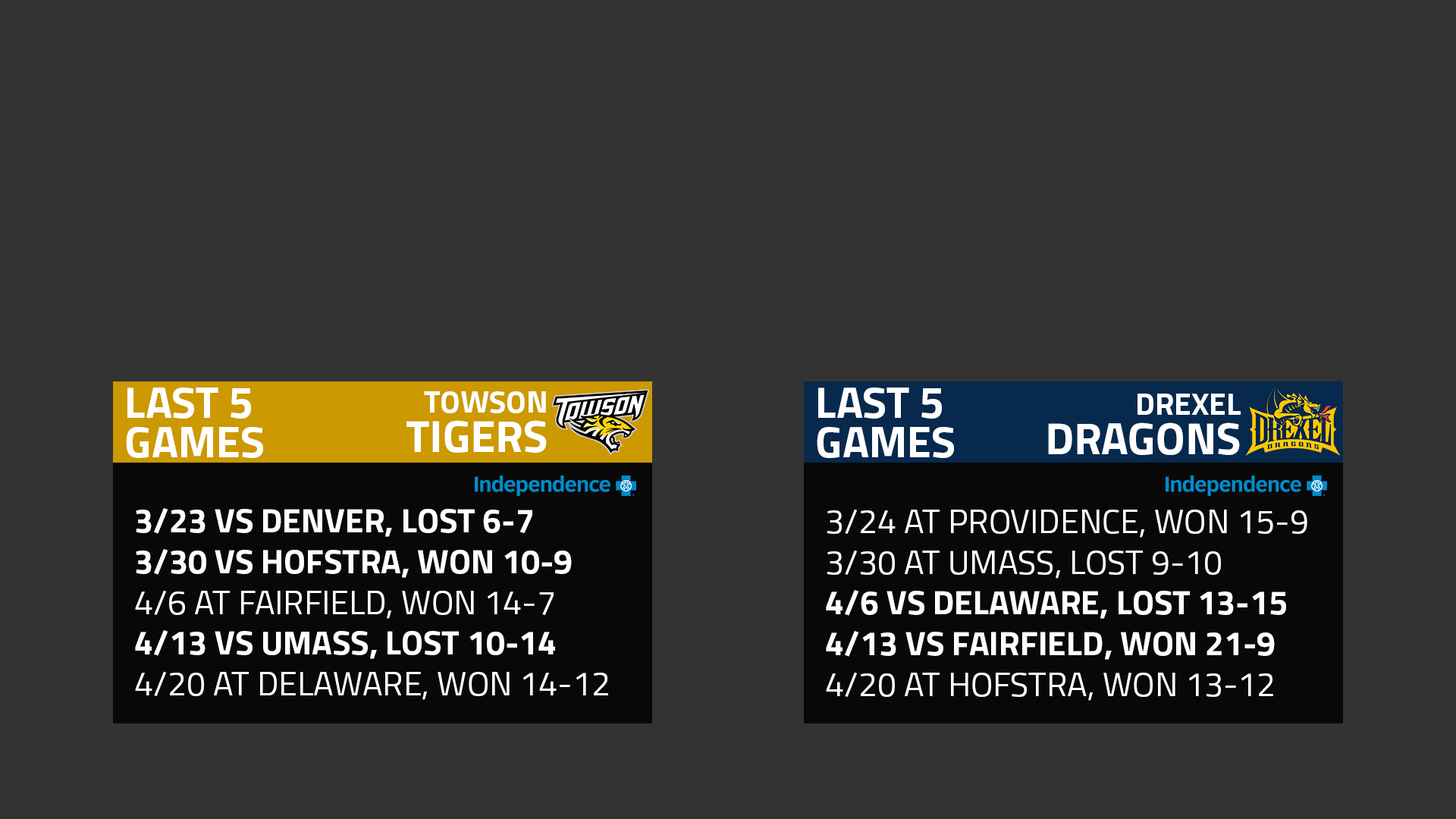
<style>
.page{position:relative;width:1456px;height:819px;background:#333333}
.page>*{position:absolute;margin:0}
.t1{font:44.2px "Titillium-Bold";color:#ffffff}
.t2{font:31px/48px "Titillium-Bold";color:#ffffff}
.t3{font:45.2px/39.5px "Titillium-Bold";color:#ffffff}
.t4{font:33.9px "Titillium-Bold";color:#ffffff}
.t5{font:33.9px "Titillium-Regular";color:#ffffff}
</style>
<div class="page">
<p class="t1" style="left:126px;top:388px;width:137px;height:70px">LAST 5 GAMES</p>
<p class="t1" style="left:817px;top:388px;width:137px;height:70px">LAST 5 GAMES</p>
<p class="t2" style="left:406px;top:391px;width:141px;height:62px;text-align:right">TOWSON<br><span class="t3">TIGERS</span></p>
<p class="t3" style="left:1048px;top:394px;width:193px;height:61px;text-align:right"><span class="t2">DREXEL<br></span>DRAGONS</p>
<p class="t4" style="left:135px;top:508px;width:473px;height:192px">3/23 VS DENVER, LOST 6-7<br>3/30 VS HOFSTRA, WON 10-9<br><span class="t5">4/6 AT FAIRFIELD, WON 14-7<br></span>4/13 VS UMASS, LOST 10-14<br><span class="t5">4/20 AT DELAWARE, WON 14-12</span></p>
<p class="t4" style="left:826px;top:509px;width:481px;height:192px"><span class="t5">3/24 AT PROVIDENCE, WON 15-9<br>3/30 AT UMASS, LOST 9-10<br></span>4/6 VS DELAWARE, LOST 13-15<br>4/13 VS FAIRFIELD, WON 21-9<br><span class="t5">4/20 AT HOFSTRA, WON 13-12</span></p>
</div>
